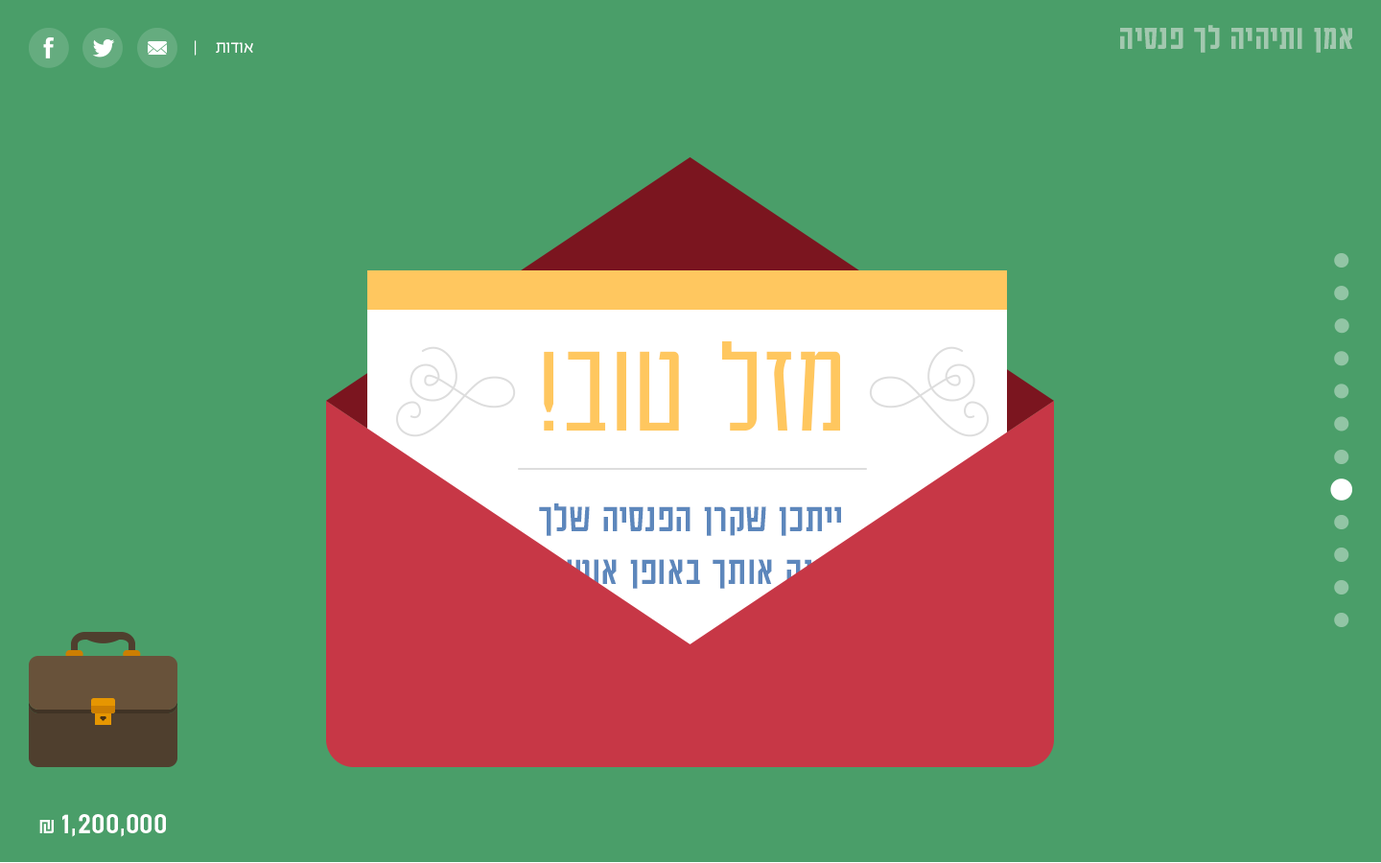
<style>
.page{position:relative;width:1381px;height:863px;background:#4a9e69}
.page>*{position:absolute;margin:0}
.t1{font:37.8px "AdumaFOT-Medium";color:#a2c8af}
.t2{font:19.2px "EzerBlock_OE-Light";color:#ffffff}
.t3{font:142.4px "AdumaFOT-Light";color:#ffc75f}
.t4{font:44.1px "AdumaFOT-Regular";color:#5d87bc}
.t5{font:33.6px "AdumaFOT-Regular";color:#ffffff}
.t6{font:24px "AdumaFOT-Regular";color:#ffffff}
</style>
<div class="page">
<p class="t1" style="left:1120px;top:25px;width:232px;height:28px">אמן ותיהיה לך פנסיה</p>
<p class="t2" style="left:195px;top:40px;width:58px;height:16px">אודות     |</p>
<p class="t3" style="left:544px;top:341px;width:296px;height:91px">מזל טוב!</p>
<p class="t4" style="left:521px;top:504px;width:338px;height:85px;text-align:center">ייתכן שקרן הפנסיה שלך<br>חיתנה אותך באופן אוטומטי</p>
<p class="t5" style="left:39px;top:814px;width:127px;height:23px">1,200,000 <span class="t6">₪</span></p>
</div>
